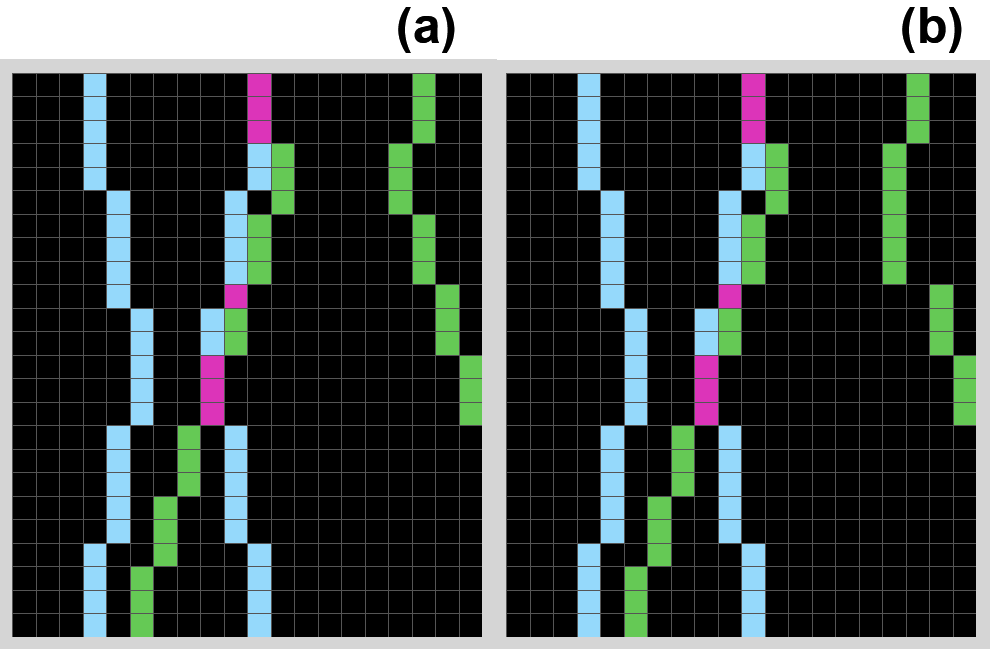
<style>
.page{position:relative;width:990px;height:649px;background:#000000}
.page>*{position:absolute;margin:0}
.t1{font:50px "Arial-BoldMT";color:#000000}
</style>
<div class="page">
<p class="t1" style="left:398px;top:7px;width:564px;height:46px">(a)             (b)</p>
</div>
